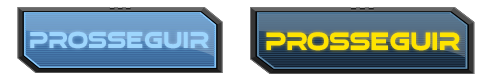
<style>
.page{position:relative;width:480px;height:79px;background:#ffffff}
.page>*{position:absolute;margin:0}
.t1{font:28.1px "elasisrg";letter-spacing:0.01em;color:#9ed6fd;scale:0.81 1}
.t2{font:30.4px "elasisrg";letter-spacing:0.01em;color:#ffe400;scale:0.81 1}
</style>
<div class="page">
<p class="t1" style="left:30px;top:31px;width:179px;height:18px">prosseguir</p>
<p class="t2" style="left:266px;top:32px;width:194px;height:19px">PROSSEGUIR</p>
</div>
